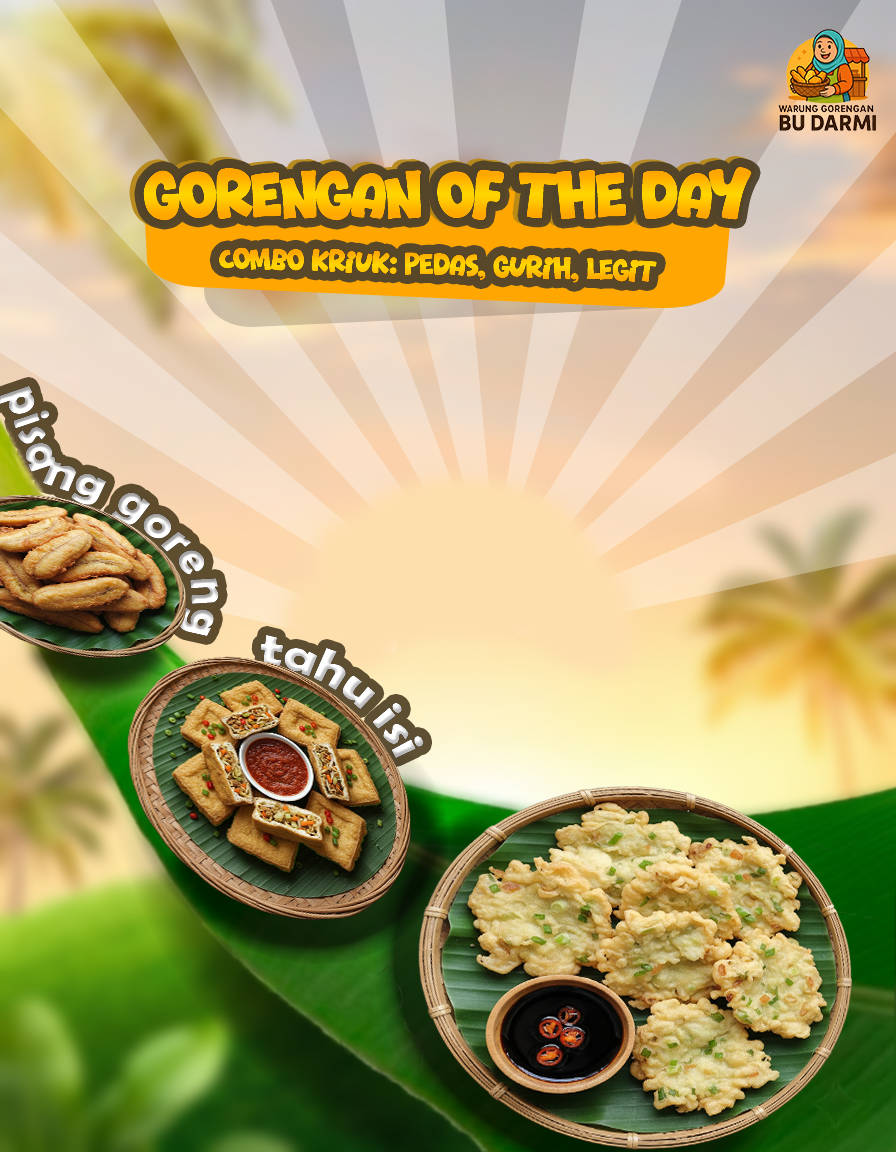
<style>
.page{position:relative;width:896px;height:1152px}
.page>*{position:absolute;margin:0}
.t1{font:65px "Halo-Dek"}
.t2{font:65px "Halo-Dek";color:#ffba00}
.t3{font:30px "Halo-Dek";color:#ffc600}
.t4{font:48px "BerlinSansFBDemi-Bold"}
</style>
<div class="page">
<p class="t1" style="left:138px;top:165px;width:609px;height:54px">Gorengan of The Day</p>
<p class="t2" style="left:143px;top:167px;width:609px;height:54px">Gorengan of The Day</p>
<p class="t3" style="left:218px;top:247px;width:439px;height:36px;rotate:2deg">Combo Kriuk: Pedas, Gurih, Legit</p>
<p class="t4" style="left:260px;top:635px;width:163px;height:123px;rotate:35deg">tahu isi</p>
</div>
